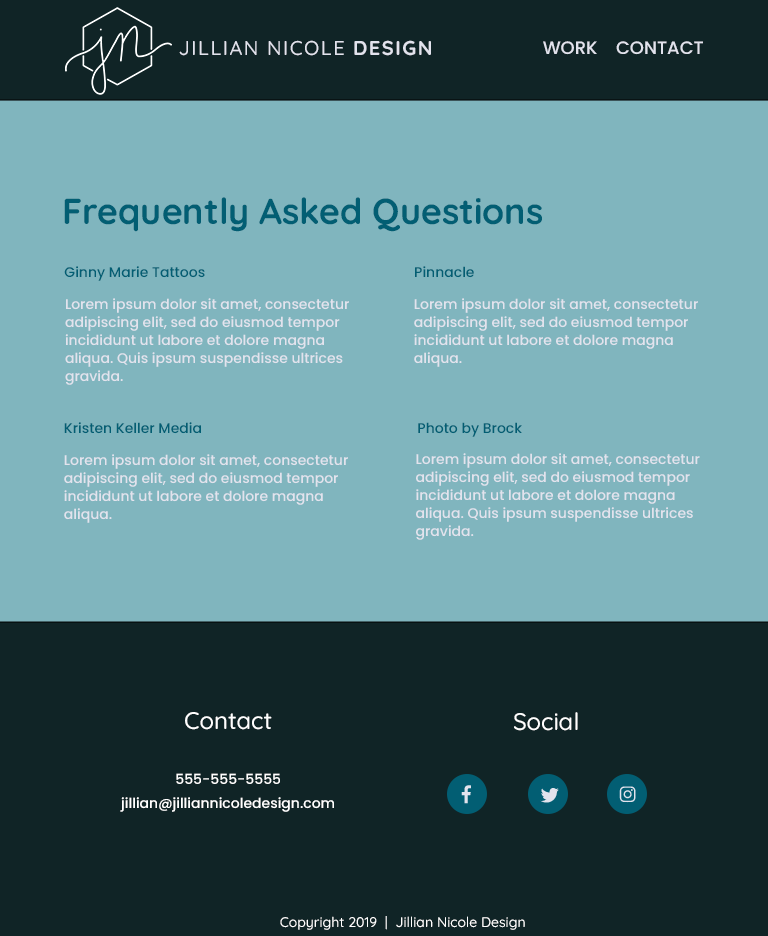
<style>
.page{position:relative;width:768px;height:936px;background:#80b5be}
.page>*{position:absolute;margin:0}
.t1{font:20px "Quicksand-Medium";letter-spacing:0.075em;color:#e2e3ed}
.t2{font:20px "Quicksand-Bold";letter-spacing:0.075em;color:#e2e3ed}
.t3{font:18px "Poppins-Medium";color:#e2e3ed}
.t4{font:36px "Quicksand-Bold";color:#025e73}
.t5{font:14px "Poppins-Medium";color:#025e73}
.t6{font:14px/18px "Poppins-Medium";color:#e2e3ed}
.t7{font:24px "Quicksand-Medium";color:#ffffff}
.t8{font:14px/24px "Poppins-Medium";color:#ffffff}
.t9{font:14px "Quicksand-Medium";color:#ffffff}
</style>
<div class="page">
<p class="t1" style="left:179px;top:40px;width:252px;height:16px">JILLIAN NICOLE <span class="t2">DESIGN</span></p>
<p class="t3" style="left:543px;top:41px;width:54px;height:14px">WORK</p>
<p class="t3" style="left:616px;top:41px;width:87px;height:14px">CONTACT</p>
<p class="t4" style="left:64px;top:197px;width:478px;height:35px">Frequently Asked Questions</p>
<p class="t5" style="left:64px;top:266px;width:141px;height:15px">Ginny Marie Tattoos</p>
<p class="t5" style="left:415px;top:266px;width:59px;height:12px">Pinnacle</p>
<p class="t6" style="left:65px;top:298px;width:284px;height:87px">Lorem ipsum dolor sit amet, consectetur adipiscing elit, sed do eiusmod tempor incididunt ut labore et dolore magna aliqua. Quis ipsum suspendisse ultrices gravida.</p>
<p class="t6" style="left:414px;top:298px;width:284px;height:69px">Lorem ipsum dolor sit amet, consectetur adipiscing elit, sed do eiusmod tempor incididunt ut labore et dolore magna aliqua.</p>
<p class="t5" style="left:64px;top:422px;width:137px;height:12px">Kristen Keller Media</p>
<p class="t5" style="left:418px;top:422px;width:104px;height:15px">Photo by Brock</p>
<p class="t6" style="left:64px;top:454px;width:284px;height:69px">Lorem ipsum dolor sit amet, consectetur adipiscing elit, sed do eiusmod tempor incididunt ut labore et dolore magna aliqua.</p>
<p class="t6" style="left:416px;top:453px;width:284px;height:87px">Lorem ipsum dolor sit amet, consectetur adipiscing elit, sed do eiusmod tempor incididunt ut labore et dolore magna aliqua. Quis ipsum suspendisse ultrices gravida.</p>
<p class="t7" style="left:185px;top:712px;width:87px;height:18px">Contact</p>
<p class="t7" style="left:514px;top:712px;width:64px;height:19px">Social</p>
<p class="t8" style="left:120px;top:773px;width:214px;height:39px;text-align:center">555-555-5555<br>jillian@jilliannicoledesign.com</p>
<p class="t9" style="left:280px;top:916px;width:245px;height:14px">Copyright 2019  |  Jillian Nicole Design</p>
</div>
